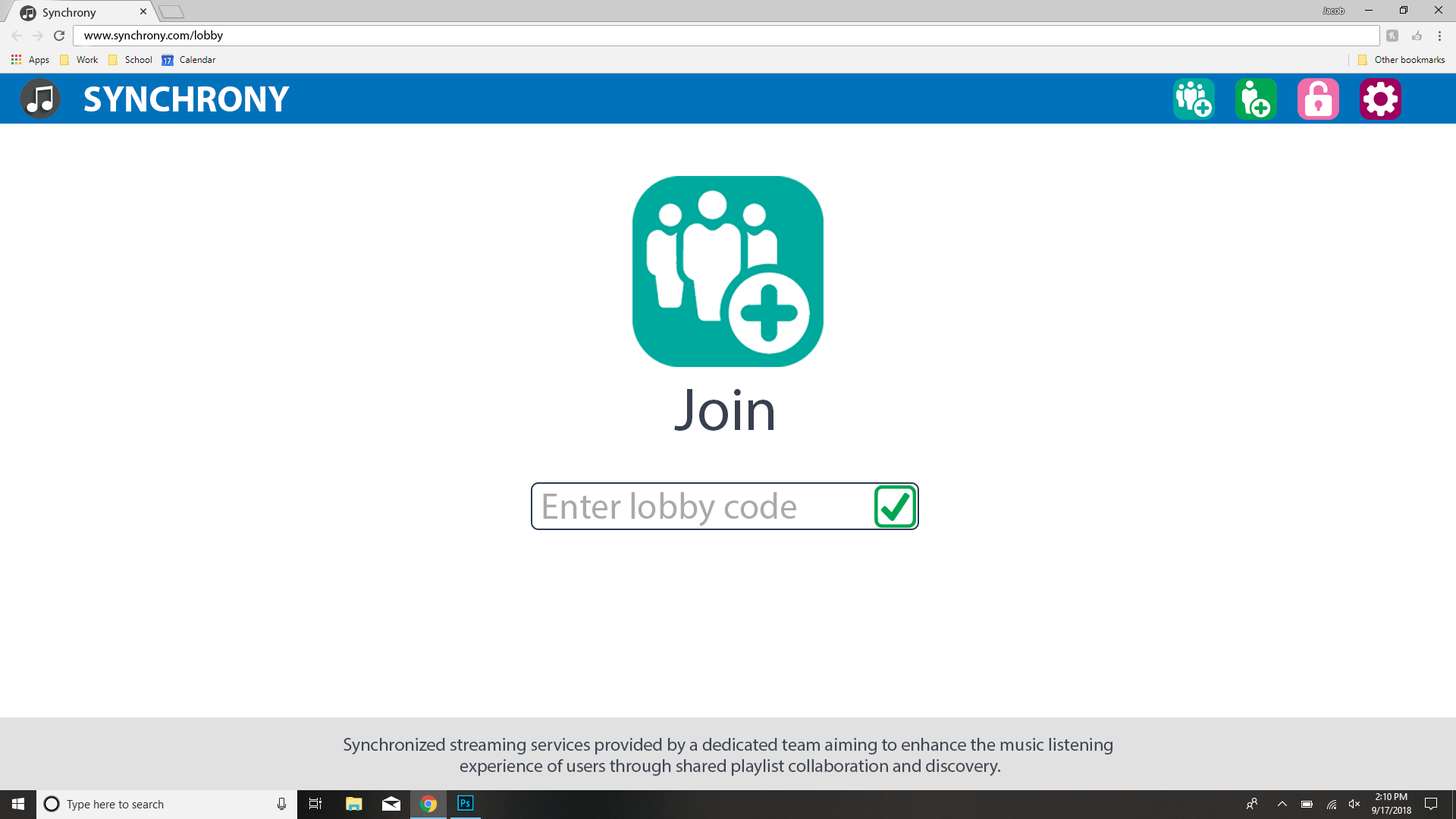
<style>
.page{position:relative;width:1456px;height:819px;background:#ffffff}
.page>*{position:absolute;margin:0}
.t1{font:60.7px "MyriadPro-Regular";color:#384050}
.t2{font:36.4px "MyriadPro-Regular";color:#a9a9a9}
.t3{font:18.2px "MyriadPro-Regular";color:#3e4754}
</style>
<div class="page">
<p class="t1" style="left:674px;top:389px;width:99px;height:42px">Join</p>
<p class="t2" style="left:543px;top:492px;width:253px;height:34px">Enter lobby code</p>
<p class="t3" style="left:344px;top:738px;width:768px;height:38px;text-align:center">Synchronized streaming services provided by a dedicated team aiming to enhance the music listening <br>experience of users through shared playlist collaboration and discovery.</p>
</div>
